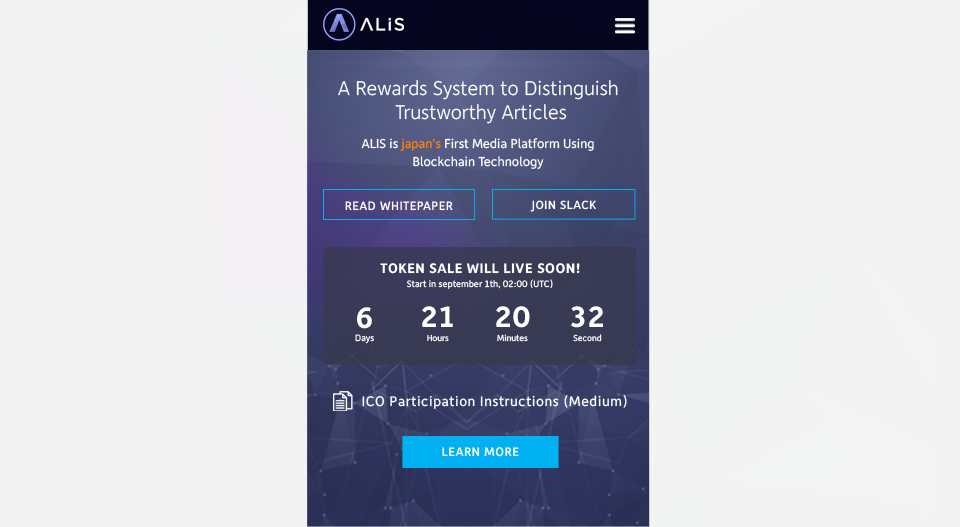
<style>
.page{position:relative;width:960px;height:527px;background:#f3f3f3}
.page>*{position:absolute;margin:0}
.t1{font:20px/24px "Depot-Light";color:#ffffff}
.t2{font:13px/18px "Depot-Regular";color:#ffffff}
.t3{font:13px/18px "Depot-Regular";color:#ff8103}
.t4{font:12.2px "Depot-Medium";letter-spacing:0.04em;color:#ffffff;text-transform:uppercase}
.t5{font:12px "Depot-Medium";letter-spacing:0.04em;color:#ffffff;text-transform:uppercase}
.t6{font:13.9px "Depot-Bold";letter-spacing:0.04em;color:#ffffff;text-transform:uppercase}
.t7{font:9.3px "Depot-Regular";color:#ffffff}
.t8{font:9.3px/13.9px "Depot-Regular";color:#ffffff}
.t9{font:29.9px/13.9px "Depot-Bold";color:#ffffff}
.t10{font:8.7px/13.9px "Depot-Regular";color:#ffffff}
.t11{font:14px "Depot-Regular";letter-spacing:0.04em;color:#ffffff}
.t12{font:12.5px "Depot-Medium";letter-spacing:0.04em;color:#ffffff;text-transform:uppercase}
</style>
<div class="page">
<p class="t1" style="left:338px;top:80px;width:280px;height:44px;text-align:center">A Rewards System to Distinguish <br>Trustworthy Articles</p>
<p class="t2" style="left:361px;top:138px;width:233px;height:31px;text-align:center">ALIS is <span class="t3">japan’s</span> First Media Platform Using<br>Blockchain Technology</p>
<p class="t4" style="left:345px;top:201px;width:108px;height:10px">read whitepaper</p>
<p class="t5" style="left:530px;top:200px;width:66px;height:12px">join slack</p>
<p class="t6" style="left:380px;top:263px;width:200px;height:11px">Token sale will live soon!</p>
<p class="t7" style="left:406px;top:279px;width:147px;height:10px">Start in september 1th, 02:00 (UTC)</p>
<p class="t8" style="left:355px;top:307px;width:19px;height:37px;text-align:center"><span class="t9">6<br></span>Days</p>
<p class="t10" style="left:422px;top:306px;width:31px;height:36px;text-align:center"><span class="t9">21<br></span>Hours</p>
<p class="t10" style="left:496px;top:306px;width:34px;height:36px;text-align:center"><span class="t9">20<br></span>Minutes</p>
<p class="t10" style="left:571px;top:306px;width:32px;height:36px;text-align:center"><span class="t9">32<br></span>Second</p>
<p class="t11" style="left:362px;top:395px;width:265px;height:14px">ICO Participation Instructions (Medium)</p>
<p class="t12" style="left:442px;top:447px;width:77px;height:10px">LEARN MORE</p>
</div>
